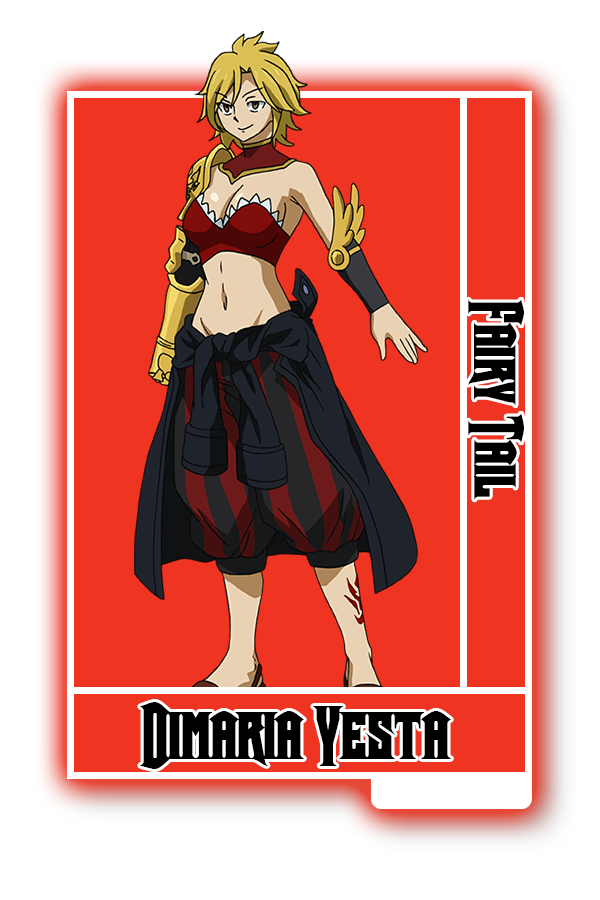
<style>
.page{position:relative;width:600px;height:900px;background:#ef3422}
.page>*{position:absolute;margin:0}
.t1{font:61.5px "Crown-Title";color:#000000}
.t2{font:70.1px "Crown-Title";color:#000000}
</style>
<div class="page">
<p class="t1" style="left:468px;top:299px;width:56px;height:201px;rotate:90deg">Fairy Tail</p>
<p class="t2" style="left:140px;top:702px;width:311px;height:67px">Dimaria Yesta</p>
</div>
